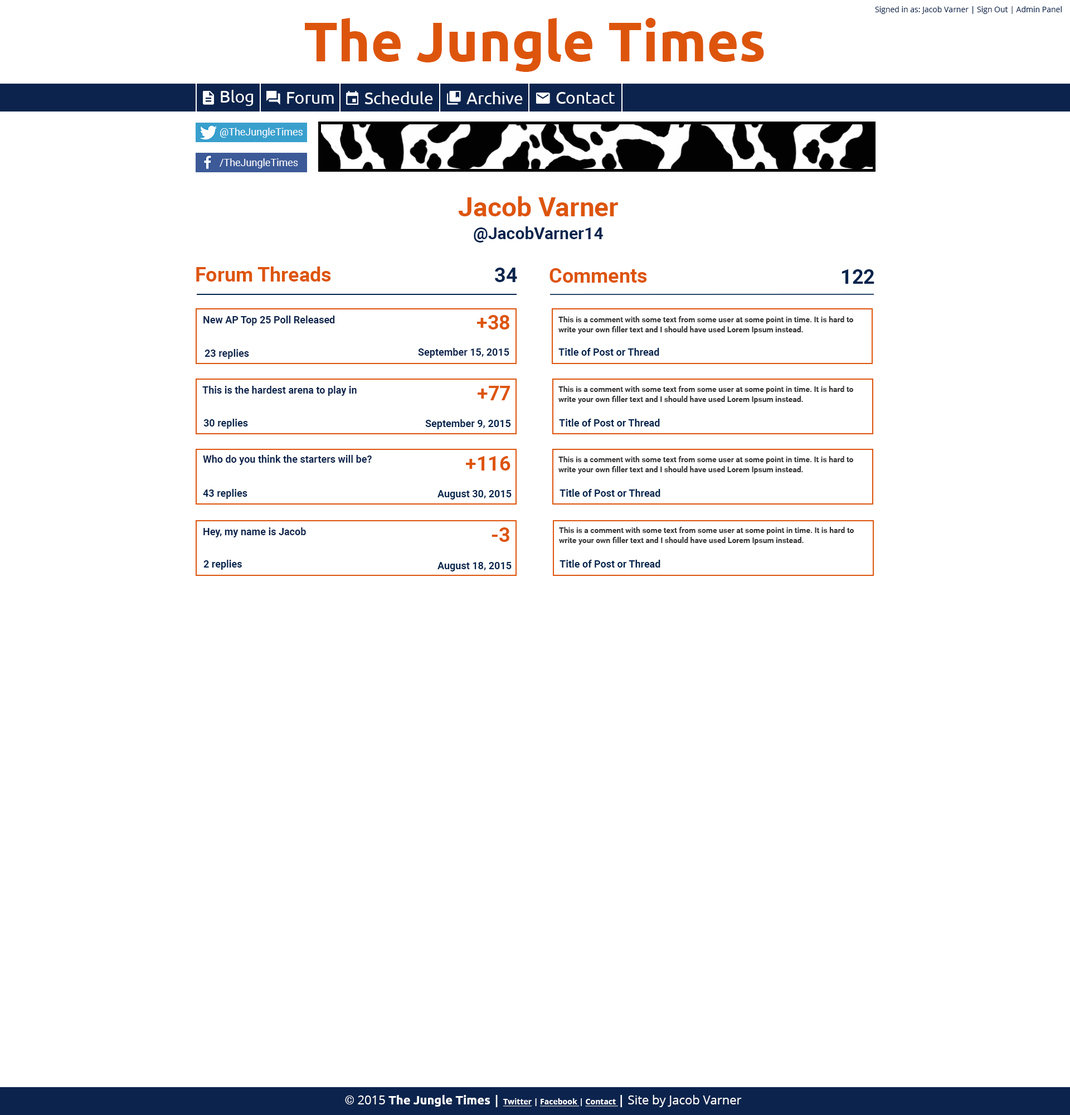
<style>
.page{position:relative;width:1070px;height:1115px;background:#ffffff}
.page>*{position:absolute;margin:0}
.t1{font:55.7px "Ubuntu-Bold";color:#dd550c}
.t2{font:7.8px "OpenSans";color:#0c244d}
.t3{font:16.7px "Ubuntu";color:#ffffff}
.t4{font:10px "Roboto-Regular";color:#ffffff}
.t5{font:26.7px "Roboto-Bold";color:#dd550c}
.t6{font:16.7px "Roboto-Bold";color:#03244d}
.t7{font:20.1px "Roboto-Bold";color:#dd550c}
.t8{font:20.1px "Roboto-Bold";color:#03244d}
.t9{font:10px "Roboto-Bold";color:#0c244d}
.t10{font:7.8px/10px "Roboto-Bold";color:#333333}
.t11{font:10px "Roboto-Bold";color:#03244d}
.t12{font:12.3px "OpenSans";color:#ffffff}
.t13{font:12.3px "Roboto-Bold";color:#ffffff}
.t14{font:12.3px "Ubuntu-Bold";color:#ffffff}
.t15{font:12.3px "OpenSans-Bold";color:#ffffff}
.t16{font:7.8px "OpenSans-Bold";color:#ffffff;text-decoration:underline}
.t17{font:7.8px "OpenSans-Bold";color:#ffffff}
</style>
<div class="page">
<p class="t1" style="left:305px;top:18px;width:459px;height:54px">The Jungle Times</p>
<p class="t2" style="left:875px;top:6px;width:187px;height:8px">Signed in as: Jacob Varner | Sign Out | Admin Panel</p>
<p class="t3" style="left:221px;top:90px;width:32px;height:16px">Blog</p>
<p class="t3" style="left:287px;top:92px;width:47px;height:12px">Forum</p>
<p class="t3" style="left:365px;top:91px;width:68px;height:13px">Schedule</p>
<p class="t3" style="left:466px;top:91px;width:57px;height:13px">Archive</p>
<p class="t3" style="left:556px;top:92px;width:59px;height:12px">Contact</p>
<p class="t4" style="left:220px;top:128px;width:83px;height:10px">@TheJungleTimes</p>
<p class="t4" style="left:220px;top:158px;width:78px;height:10px">/TheJungleTimes</p>
<p class="t5" style="left:458px;top:196px;width:160px;height:20px">Jacob Varner</p>
<p class="t6" style="left:474px;top:226px;width:129px;height:16px">@JacobVarner14</p>
<p class="t7" style="left:196px;top:266px;width:135px;height:15px">Forum Threads</p>
<p class="t8" style="left:495px;top:267px;width:22px;height:15px">34</p>
<p class="t7" style="left:549px;top:268px;width:98px;height:15px">Comments</p>
<p class="t8" style="left:841px;top:269px;width:33px;height:15px">122</p>
<p class="t9" style="left:203px;top:315px;width:132px;height:10px">New AP Top 25 Poll Released</p>
<p class="t7" style="left:477px;top:315px;width:32px;height:14px">+38</p>
<p class="t10" style="left:558px;top:316px;width:296px;height:18px">This is a comment with some text from some user at some point in time. It is hard to<br>write your own filler text and I should have used Lorem Ipsum instead.</p>
<p class="t9" style="left:205px;top:349px;width:44px;height:10px">23 replies</p>
<p class="t9" style="left:418px;top:348px;width:91px;height:10px">September 15, 2015</p>
<p class="t11" style="left:558px;top:348px;width:101px;height:8px">Title of Post or Thread</p>
<p class="t9" style="left:202px;top:386px;width:155px;height:10px">This is the hardest arena to play in</p>
<p class="t7" style="left:478px;top:386px;width:32px;height:14px">+77</p>
<p class="t10" style="left:558px;top:386px;width:296px;height:17px">This is a comment with some text from some user at some point in time. It is hard to<br>write your own filler text and I should have used Lorem Ipsum instead.</p>
<p class="t11" style="left:203px;top:418px;width:45px;height:11px">30 replies</p>
<p class="t11" style="left:425px;top:419px;width:86px;height:10px">September 9, 2015</p>
<p class="t11" style="left:559px;top:418px;width:101px;height:8px">Title of Post or Thread</p>
<p class="t9" style="left:203px;top:455px;width:169px;height:10px">Who do you think the starters will be?</p>
<p class="t7" style="left:466px;top:456px;width:44px;height:14px">+116</p>
<p class="t10" style="left:558px;top:456px;width:296px;height:18px">This is a comment with some text from some user at some point in time. It is hard to<br>write your own filler text and I should have used Lorem Ipsum instead.</p>
<p class="t11" style="left:203px;top:489px;width:44px;height:10px">43 replies</p>
<p class="t11" style="left:437px;top:490px;width:75px;height:9px">August 30, 2015</p>
<p class="t11" style="left:559px;top:489px;width:101px;height:8px">Title of Post or Thread</p>
<p class="t9" style="left:203px;top:527px;width:103px;height:10px">Hey, my name is Jacob</p>
<p class="t7" style="left:491px;top:527px;width:18px;height:15px">-3</p>
<p class="t10" style="left:559px;top:527px;width:295px;height:17px">This is a comment with some text from some user at some point in time. It is hard to<br>write your own filler text and I should have used Lorem Ipsum instead.</p>
<p class="t11" style="left:203px;top:559px;width:39px;height:11px">2 replies</p>
<p class="t11" style="left:437px;top:562px;width:75px;height:9px">August 18, 2015</p>
<p class="t11" style="left:559px;top:559px;width:101px;height:8px">Title of Post or Thread</p>
<p class="t12" style="left:345px;top:1094px;width:397px;height:13px"><span class="t13">© </span>2015 <span class="t14">The Jungle Times </span><span class="t15">| </span><span class="t16">Twitter</span><span class="t17"> | </span><span class="t16">Facebook </span><span class="t17">| </span><span class="t16">Contact </span><span class="t15">| </span>Site by Jacob Varner</p>
</div>
